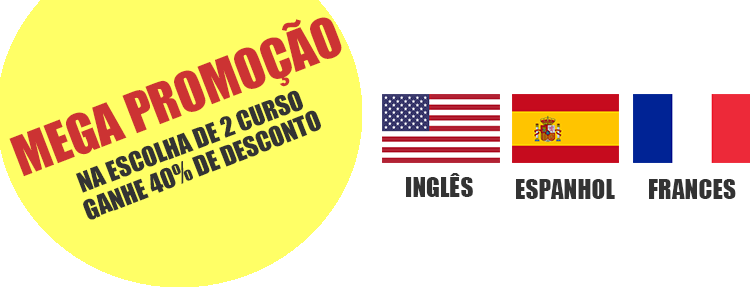
<style>
.page{position:relative;width:750px;height:300px;background:#ffffff}
.page>*{position:absolute;margin:0}
.t1{font:50.8px "Impact";color:#cc3333}
.t2{font:25.4px "Impact";color:#333333}
</style>
<div class="page">
<p class="t1" style="left:9px;top:17px;width:333px;height:160px;rotate:-21deg">MEGA PROMOÇÃO</p>
<p class="t2" style="left:75px;top:90px;width:228px;height:103px;rotate:-21deg">NA ESCOLHA DE 2 CURSO</p>
<p class="t2" style="left:83px;top:110px;width:238px;height:110px;rotate:-21deg">GANHE 40% DE DESCONTO</p>
<p class="t2" style="left:406px;top:173px;width:67px;height:24px">INGLÊS</p>
<p class="t2" style="left:516px;top:179px;width:99px;height:20px">ESPANHOL</p>
<p class="t2" style="left:649px;top:179px;width:87px;height:20px">FRANCES</p>
</div>
